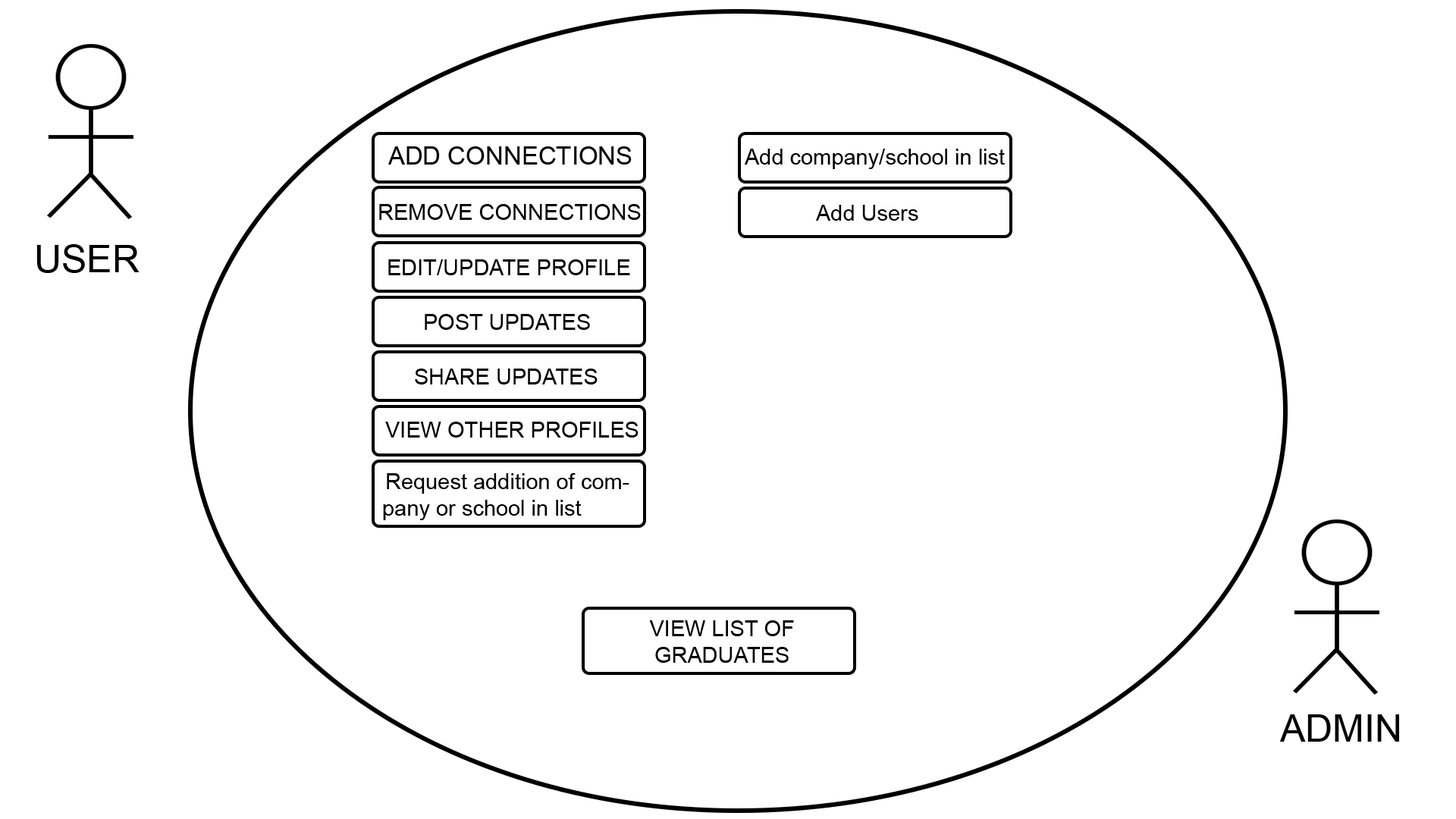
<style>
.page{position:relative;width:1456px;height:819px;background:#ffffff}
.page>*{position:absolute;margin:0}
.t1{font:25px "ArialMT";color:#000000}
.t2{font:22px "ArialMT";color:#000000}
.t3{font:37.9px "ArialMT";color:#000000}
</style>
<div class="page">
<p class="t1" style="left:388px;top:146px;width:244px;height:19px">ADD CONNECTIONS</p>
<p class="t2" style="left:745px;top:149px;width:260px;height:20px">Add company/school in list</p>
<p class="t2" style="left:379px;top:204px;width:262px;height:16px">REMOVE CONNECTIONS</p>
<p class="t2" style="left:816px;top:205px;width:102px;height:16px">Add Users</p>
<p class="t3" style="left:36px;top:244px;width:104px;height:29px">USER</p>
<p class="t2" style="left:388px;top:259px;width:242px;height:16px">EDIT/UPDATE PROFILE</p>
<p class="t2" style="left:425px;top:314px;width:165px;height:16px">POST UPDATES</p>
<p class="t2" style="left:415px;top:369px;width:183px;height:15px">SHARE UPDATES</p>
<p class="t2" style="left:385px;top:422px;width:254px;height:16px">VIEW OTHER PROFILES</p>
<p class="t2" style="left:383px;top:473px;width:246px;height:47px;text-align:right">Request addition of company or school in list</p>
<p class="t2" style="left:649px;top:620px;width:145px;height:43px;text-align:center">VIEW LIST OF<br>GRADUATES</p>
<p class="t3" style="left:1280px;top:714px;width:119px;height:28px">ADMIN</p>
</div>
